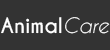
<style>
.page{position:relative;width:110px;height:50px;background:#333333}
.page>*{position:absolute;margin:0}
.t1{font:20px "CaviarDreams-Bold";color:#ffffff}
.t2{font:20px "CaviarDreams-Italic";color:#ffffff}
</style>
<div class="page">
<p class="t1" style="left:1px;top:17px;width:109px;height:17px">Animal<span class="t2">Care</span></p>
</div>
